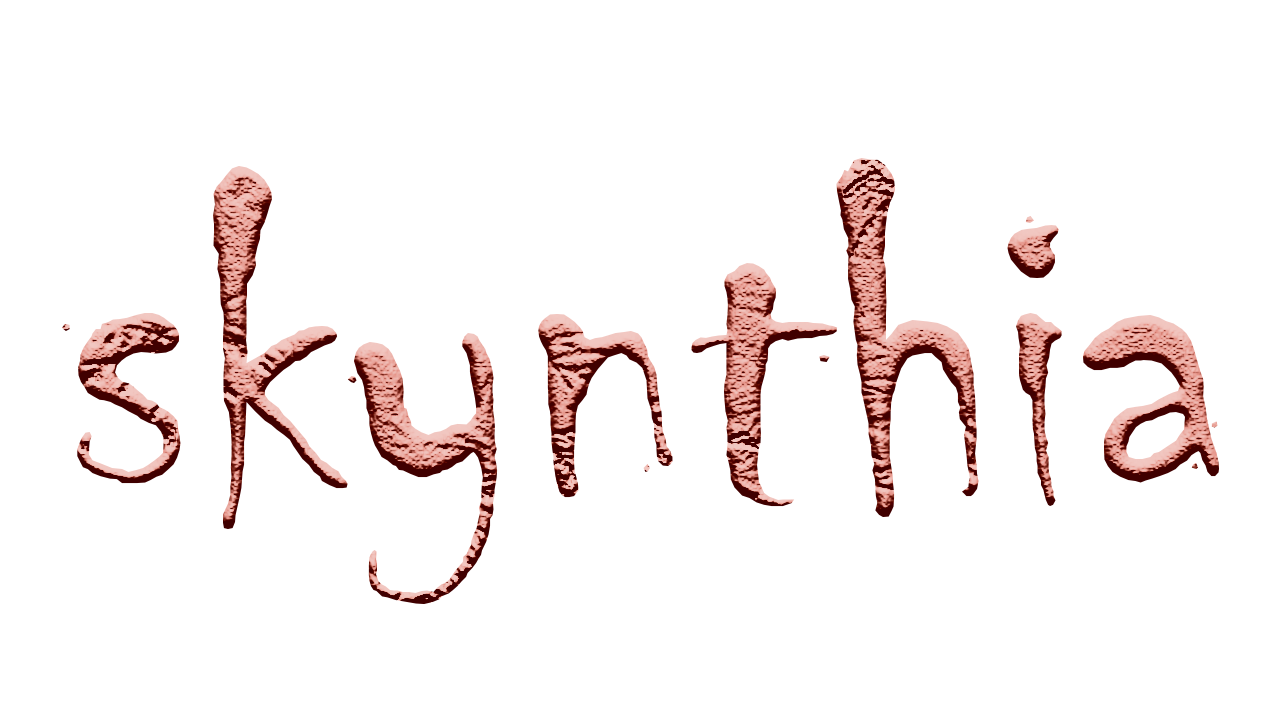
<style>
.page{position:relative;width:1280px;height:720px;background:#ffffff}
.page>*{position:absolute;margin:0}
.t1{font:500px "Chiller-Regular"}
</style>
<div class="page">
<p class="t1" style="left:62px;top:158px;width:1157px;height:446px">skynthia</p>
</div>
